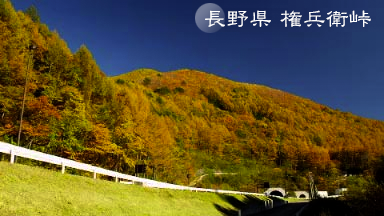
<style>
.page{position:relative;width:384px;height:216px}
.page>*{position:absolute;margin:0}
.t1{font:23px "DFLeiSho-SB-MP-RKSJ-H";color:#ffffff}
</style>
<div class="page">
<p class="t1" style="left:205px;top:10px;width:166px;height:17px">長野県 権兵衛峠</p>
</div>
